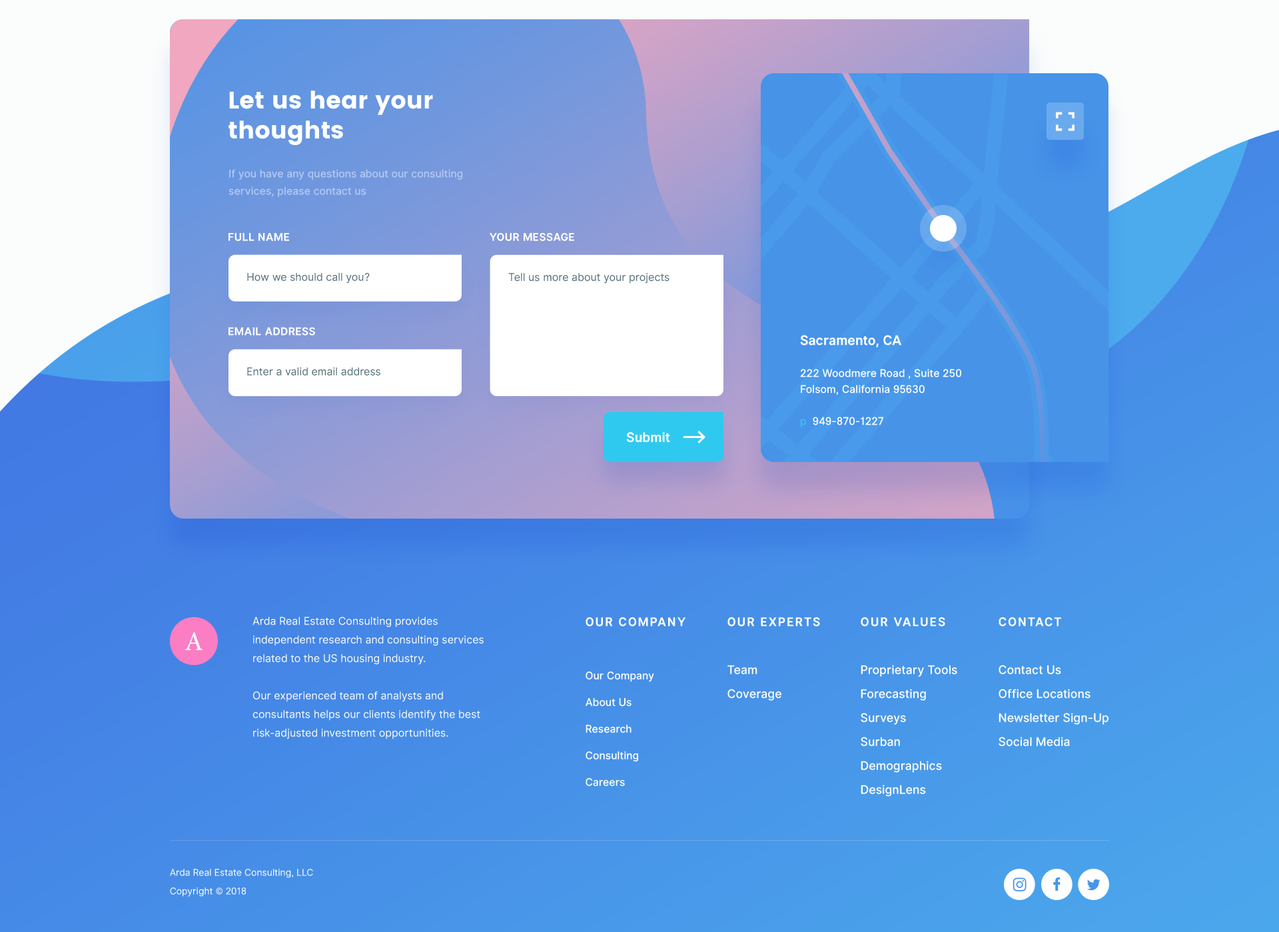
<style>
.page{position:relative;width:1279px;height:932px}
.page>*{position:absolute;margin:0}
.t1{font:24px/30px "Poppins";color:#ffffff}
.t2{font:10.7px/17.3px "InterUI-Medium";color:#b2c9f3}
.t3{font:10.7px "InterUI-Bold";letter-spacing:0.025em;color:#ffffff}
.t4{font:10.7px "InterUI-Regular";color:#546e7a}
.t5{font:10.7px/16px "InterUI-Medium";color:#ffffff}
.t6{font:13.3px/16px "InterUI-Bold";color:#ffffff}
.t7{font:10.7px/16px "InterUI-Medium";color:#2fc9ef}
.t8{font:13.3px "InterUI-Bold";color:#ffffff}
.t9{font:10.7px/18.6px "InterUI-Regular";color:#ffffff}
.t10{font:10.7px/26.6px "InterUI-Medium";color:#ffffff}
.t11{font:12px/26.6px "InterUI-Bold";letter-spacing:0.1em;color:#ffffff;text-transform:uppercase}
.t12{font:12px/24px "InterUI-Medium";color:#ffffff}
.t13{font:12px/24px "InterUI-Bold";letter-spacing:0.1em;color:#ffffff;text-transform:uppercase}
.t14{font:9.3px/9.3px "InterUI-Regular";color:#ffffff}
</style>
<div class="page">
<p class="t1" style="left:228px;top:91px;width:205px;height:54px;text-align:right">Let us hear your<br>thoughts</p>
<p class="t2" style="left:228px;top:169px;width:235px;height:28px;text-align:right">If you have any questions about our consulting services, please contact us</p>
<p class="t3" style="left:228px;top:233px;width:61px;height:8px">FULL NAME</p>
<p class="t3" style="left:490px;top:233px;width:84px;height:8px">YOUR MESSAGE</p>
<p class="t4" style="left:247px;top:273px;width:123px;height:11px">How we should call you?</p>
<p class="t4" style="left:508px;top:273px;width:161px;height:11px">Tell us more about your projects</p>
<p class="t3" style="left:228px;top:327px;width:87px;height:9px">EMAIL ADDRESS</p>
<p class="t5" style="left:800px;top:335px;width:161px;height:93px;text-align:right"><span class="t6">Sacramento, CA<br></span><br>222 Woodmere Road , Suite 250<br>Folsom, California 95630<br><br><span class="t7">p</span>  949-870-1227</p>
<p class="t4" style="left:247px;top:367px;width:133px;height:9px">Enter a valid email address</p>
<p class="t8" style="left:626px;top:432px;width:44px;height:11px">Submit</p>
<p class="t9" style="left:252px;top:617px;width:232px;height:122px;text-align:right">Arda Real Estate Consulting provides independent research and consulting services related to the US housing industry.<br><br>Our experienced team of analysts and consultants helps our clients identify the best risk-adjusted investment opportunities.</p>
<p class="t10" style="left:585px;top:617px;width:101px;height:170px;text-align:right"><span class="t11">Our Company<br><br></span>Our Company<br>About Us<br>Research<br>Consulting<br>Careers</p>
<p class="t12" style="left:727px;top:617px;width:93px;height:84px;text-align:right"><span class="t13">Our EXpERTS<br><br></span>Team<br>Coverage</p>
<p class="t12" style="left:861px;top:617px;width:96px;height:180px;text-align:right"><span class="t13">Our VALUES<br><br></span>Proprietary Tools<br>Forecasting<br>Surveys<br>Surban<br>Demographics<br>DesignLens</p>
<p class="t12" style="left:998px;top:617px;width:110px;height:130px;text-align:right"><span class="t13">CONTACT<br><br></span>Contact Us<br>Office Locations<br>Newsletter Sign-Up<br>Social Media</p>
<p class="t14" style="left:170px;top:869px;width:143px;height:28px;text-align:right">Arda Real Estate Consulting, LLC<br><br>Copyright © 2018</p>
</div>
